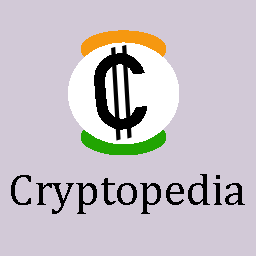
<style>
.page{position:relative;width:256px;height:256px;background:#d2c9d7}
.page>*{position:absolute;margin:0}
.t1{font:105px "DINAlternate-Bold";color:#000000}
.t2{font:45px "CambriaMath";color:#000000}
</style>
<div class="page">
<p class="t1" style="left:94px;top:53px;width:53px;height:77px;rotate:-5deg">C</p>
<p class="t2" style="left:11px;top:174px;width:234px;height:40px">Cryptopedia</p>
</div>
